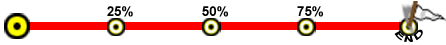
<style>
.page{position:relative;width:446px;height:45px;background:#ffffff}
.page>*{position:absolute;margin:0}
.t1{font:13.5px "Arial-BoldMT";color:#000000}
.t2{font:8.1px "Arial-BoldMT";color:#000000}
</style>
<div class="page">
<p class="t1" style="left:107px;top:6px;width:26px;height:11px">25%</p>
<p class="t1" style="left:202px;top:6px;width:26px;height:11px">50%</p>
<p class="t1" style="left:297px;top:6px;width:26px;height:11px">75%</p>
<p class="t2" style="left:394px;top:29px;width:29px;height:13px">END</p>
</div>
